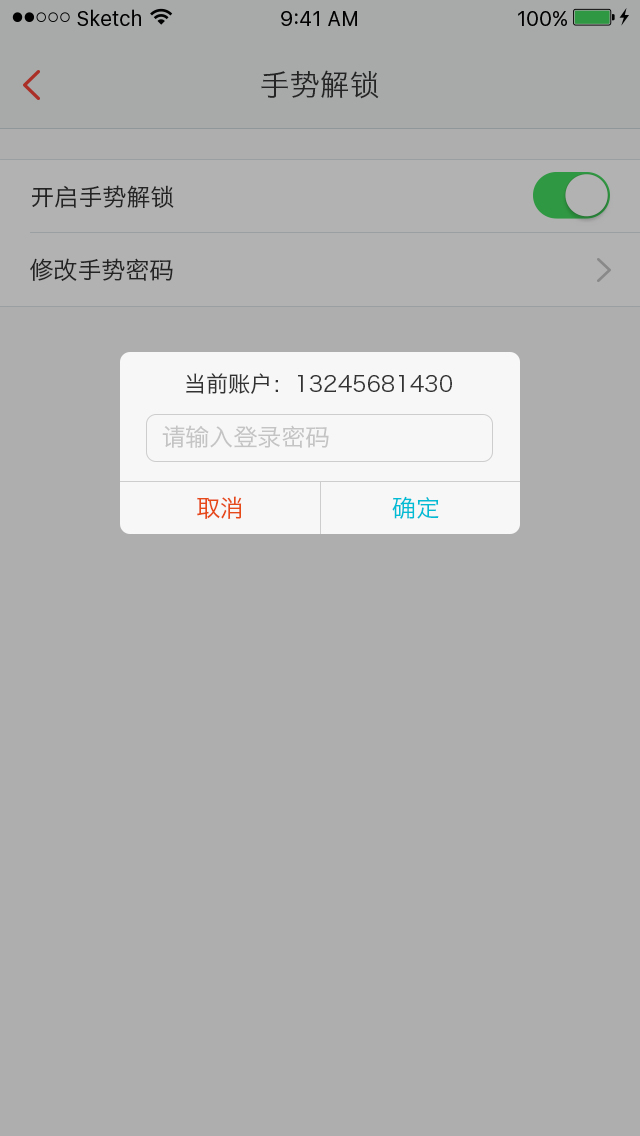
<style>
.page{position:relative;width:640px;height:1136px;background:#aeaeae}
.page>*{position:absolute;margin:0}
.t1{font:30px "HiraginoSansGB-W3";color:#333333}
.t2{font:24px "HiraginoSansGB-W3";color:#333333}
.t3{font:22px "HiraginoSansGB-W3";color:#333333}
.t4{font:24px "HiraginoSansGB-W3";color:#c4c4c4}
.t5{font:24px "HiraginoSansGB-W3";color:#e64a19}
.t6{font:24px "HiraginoSansGB-W3";color:#00bcd4}
</style>
<div class="page">
<p class="t1" style="left:261px;top:70px;width:118px;height:29px">手势解锁</p>
<p class="t2" style="left:32px;top:185px;width:142px;height:23px">开启手势解锁</p>
<p class="t2" style="left:30px;top:258px;width:143px;height:23px">修改手势密码</p>
<p class="t3" style="left:186px;top:373px;width:266px;height:21px">当前账户：13245681430</p>
<p class="t4" style="left:162px;top:425px;width:167px;height:23px">请输入登录密码</p>
<p class="t5" style="left:197px;top:496px;width:45px;height:23px">取消</p>
<p class="t6" style="left:392px;top:496px;width:47px;height:23px">确定</p>
</div>
